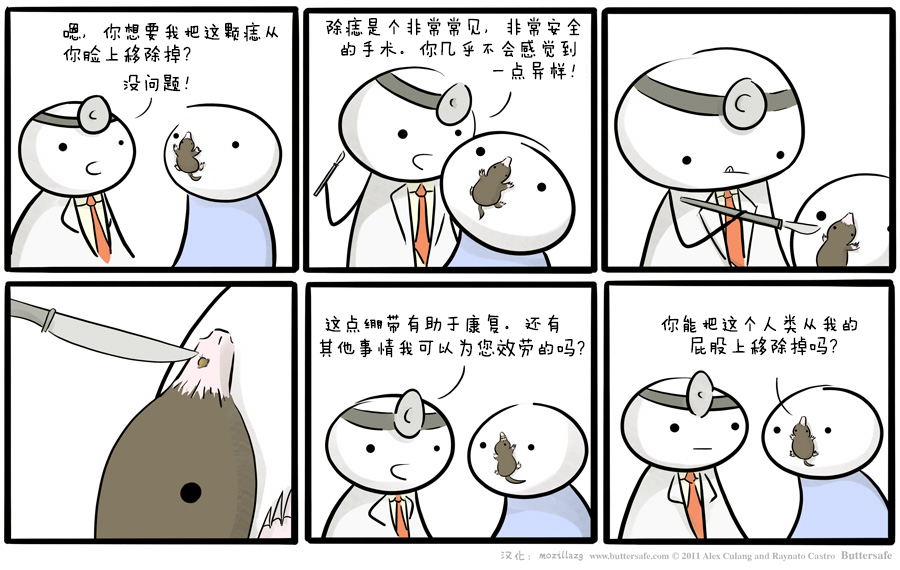
<style>
.page{position:relative;width:900px;height:570px;background:#ffffff}
.page>*{position:absolute;margin:0}
.t1{font:20px/22px "FZMWJW--GB1-0";color:#000000}
.t2{font:20px "FZMWJW--GB1-0";color:#000000}
.t3{font:20px/24px "FZMWJW--GB1-0";color:#000000}
.t4{font:13px "FZMWJW--GB1-0";color:#afafaf}
</style>
<div class="page">
<p class="t1" style="left:326px;top:17px;width:255px;height:63px">除痣是个非常常见，非常安全<br>  的手术。你几乎不会感觉到<br>                       一点异样！</p>
<p class="t1" style="left:63px;top:22px;width:215px;height:42px">嗯，你想要我把这颗痣从<br>你脸上移除掉？</p>
<p class="t2" style="left:123px;top:74px;width:66px;height:18px">没问题！</p>
<p class="t3" style="left:319px;top:314px;width:266px;height:44px">这点绷带有助于康复。还有<br>其他事情我可以为您效劳的吗？</p>
<p class="t1" style="left:661px;top:314px;width:197px;height:42px">你能把这个人类从我的<br>    屁股上移除掉吗？</p>
<p class="t4" style="left:501px;top:550px;width:82px;height:11px">汉化：mozillazg</p>
</div>
